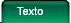
<style>
.page{position:relative;width:71px;height:23px}
.page>*{position:absolute;margin:0}
.t1{font:11px "ArialMT";color:#ffffff}
</style>
<div class="page">
<p class="t1" style="left:17px;top:7px;width:26px;height:8px">Texto</p>
</div>
